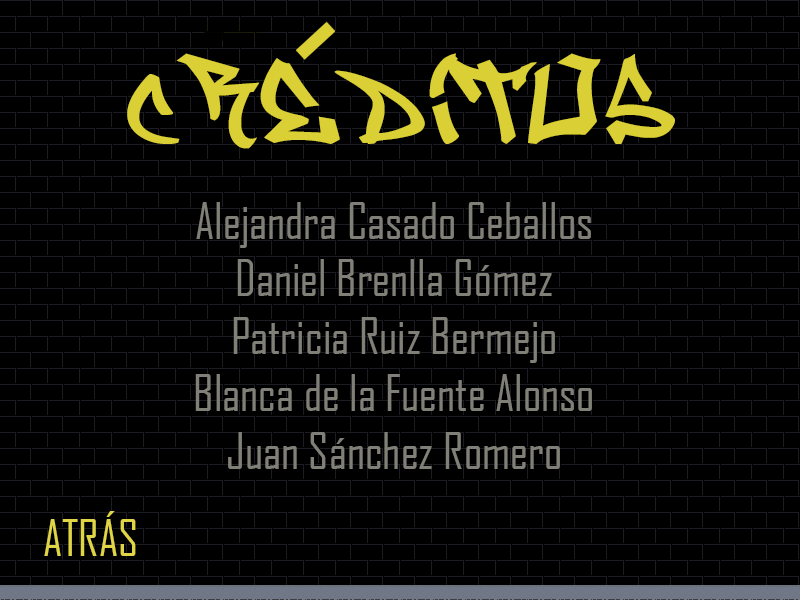
<style>
.page{position:relative;width:800px;height:600px;background:#000000}
.page>*{position:absolute;margin:0}
.t1{font:100px "Graffiti";color:#dacf34}
.t2{font:48px "AgencyFB-Reg";color:#818078}
.t3{font:48px "AgencyFB-Reg";color:#dfd547}
</style>
<div class="page">
<p class="t1" style="left:127px;top:53px;width:548px;height:96px">Creditos</p>
<p class="t2" style="left:195px;top:202px;width:397px;height:267px;text-align:center">Alejandra Casado Ceballos<br>Daniel Brenlla Gómez<br>Patricia Ruiz Bermejo<br>Blanca de la Fuente Alonso<br>Juan Sánchez Romero</p>
<p class="t3" style="left:44px;top:511px;width:92px;height:45px">ATRÁS</p>
</div>
